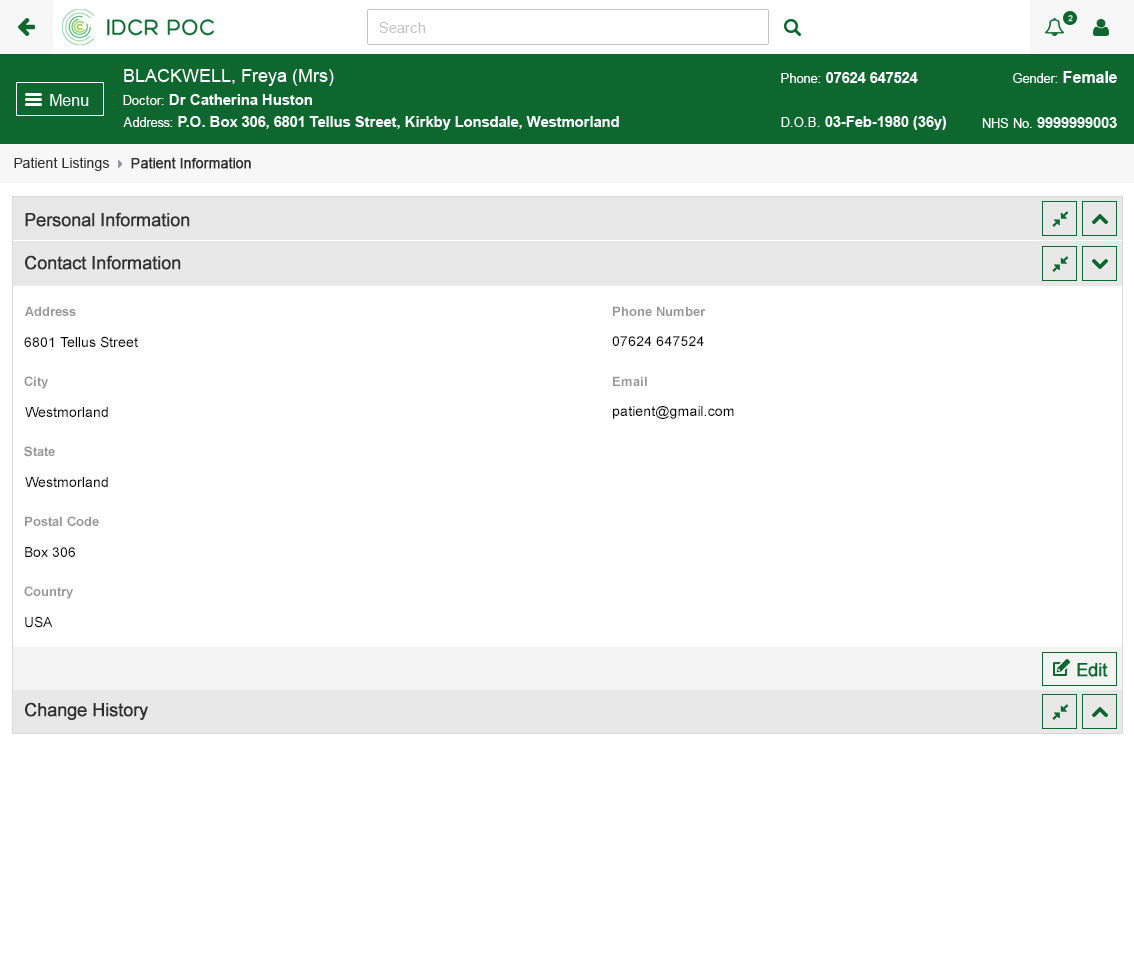
<style>
.page{position:relative;width:1134px;height:977px;background:#ffffff}
.page>*{position:absolute;margin:0}
.t1{font:14px "ArialMT";color:#313131}
.t2{font:14px "ArialMT";color:#313131;font-weight:bold}
.t3{font:18px "ArialMT";color:#303030;font-weight:bold}
.t4{font:13px "Arial-BoldMT";color:#959595}
.t5{font:14px "ArialMT";color:#000000}
</style>
<div class="page">
<p class="t1" style="left:14px;top:157px;width:96px;height:14px">Patient Listings</p>
<p class="t2" style="left:131px;top:157px;width:120px;height:12px">Patient Information</p>
<p class="t3" style="left:25px;top:212px;width:165px;height:15px">Personal Information</p>
<p class="t3" style="left:25px;top:255px;width:156px;height:15px">Contact Information</p>
<p class="t4" style="left:25px;top:306px;width:51px;height:10px">Address</p>
<p class="t4" style="left:613px;top:306px;width:93px;height:10px">Phone Number</p>
<p class="t5" style="left:24px;top:336px;width:114px;height:12px">6801 Tellus Street</p>
<p class="t5" style="left:612px;top:336px;width:92px;height:10px">07624 647524</p>
<p class="t4" style="left:24px;top:376px;width:24px;height:13px">City</p>
<p class="t4" style="left:613px;top:376px;width:34px;height:10px">Email</p>
<p class="t5" style="left:25px;top:407px;width:83px;height:10px">Westmorland</p>
<p class="t5" style="left:613px;top:406px;width:121px;height:13px">patient@gmail.com</p>
<p class="t4" style="left:24px;top:446px;width:31px;height:11px">State</p>
<p class="t5" style="left:25px;top:477px;width:83px;height:10px">Westmorland</p>
<p class="t4" style="left:25px;top:516px;width:74px;height:10px">Postal Code</p>
<p class="t5" style="left:25px;top:547px;width:50px;height:10px">Box 306</p>
<p class="t4" style="left:24px;top:586px;width:49px;height:13px">Country</p>
<p class="t5" style="left:25px;top:616px;width:28px;height:12px">USA</p>
<p class="t3" style="left:25px;top:702px;width:123px;height:18px">Change History</p>
</div>
